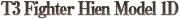
<style>
.page{position:relative;width:180px;height:19px;background:#ffffff}
.page>*{position:absolute;margin:0}
.t1{font:18px "RyuminPro-ExBold";letter-spacing:-0.09em;color:#4a3f32;font-weight:bold;scale:0.9 1}
</style>
<div class="page">
<p class="t1" style="left:0px;top:1px;width:179px;height:18px">T3 Fighter Hien Model 1D</p>
</div>
